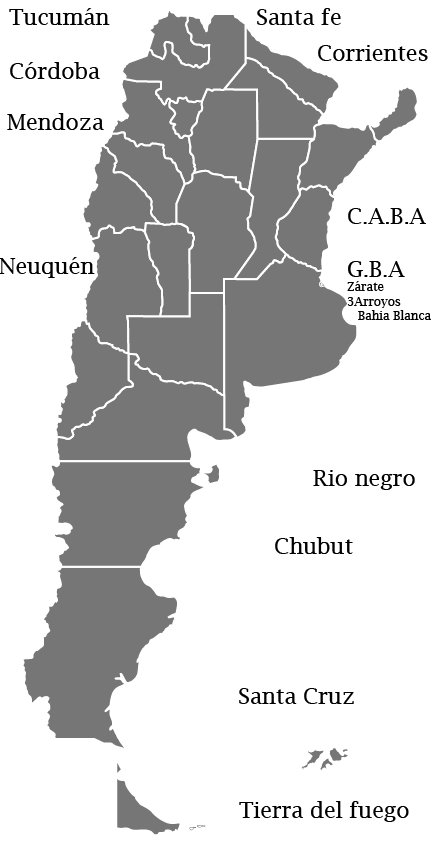
<style>
.page{position:relative;width:435px;height:842px;background:#ffffff}
.page>*{position:absolute;margin:0}
.t1{font:22px "LucidaBright";color:#000000}
.t2{font:12px "LucidaBright";color:#000000}
</style>
<div class="page">
<p class="t1" style="left:9px;top:8px;width:101px;height:17px">Tucumán</p>
<p class="t1" style="left:257px;top:8px;width:84px;height:17px">Santa fe</p>
<p class="t1" style="left:318px;top:45px;width:110px;height:16px">Corrientes</p>
<p class="t1" style="left:10px;top:62px;width:90px;height:17px">Córdoba</p>
<p class="t1" style="left:7px;top:113px;width:97px;height:17px">Mendoza</p>
<p class="t2" style="left:347px;top:208px;width:84px;height:112px"><span class="t1">C.A.B.A<br><br>G.B.A<br></span>Zárate<br>3Arroyos<br>   Bahia Blanca</p>
<p class="t1" style="left:0px;top:257px;width:95px;height:21px">Neuquén</p>
<p class="t1" style="left:313px;top:470px;width:102px;height:20px">Rio negro</p>
<p class="t1" style="left:275px;top:537px;width:78px;height:17px">Chubut</p>
<p class="t1" style="left:239px;top:688px;width:115px;height:16px">Santa Cruz</p>
<p class="t1" style="left:239px;top:801px;width:170px;height:21px">Tierra del fuego</p>
</div>
